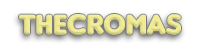
<style>
.page{position:relative;width:200px;height:50px;background:#ffffff}
.page>*{position:absolute;margin:0}
.t1{font:30px "Insaniburger";color:#f1eb91;text-transform:uppercase}
</style>
<div class="page">
<p class="t1" style="left:19px;top:14px;width:162px;height:21px">theCromas</p>
</div>
